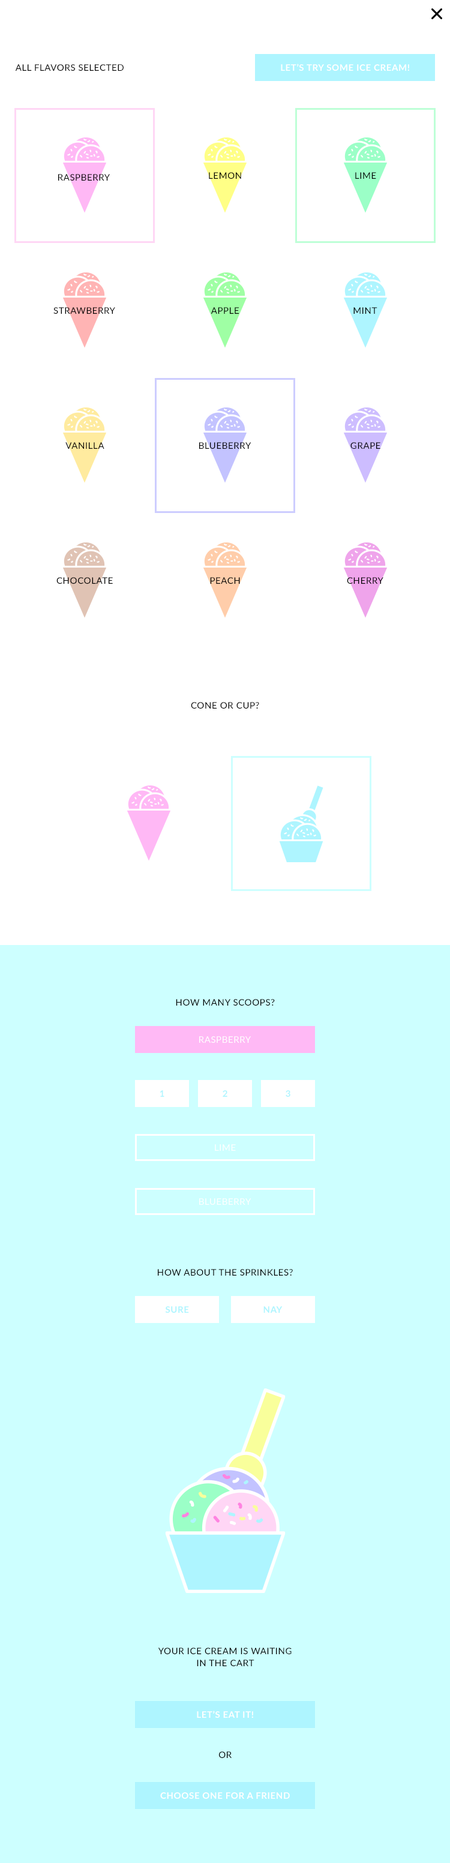
<style>
.page{position:relative;width:450px;height:1863px;background:#ffffff}
.page>*{position:absolute;margin:0}
.t1{font:9px "Lato-Regular";letter-spacing:0.04em;color:#000000;text-transform:uppercase}
.t2{font:9px "Lato-Bold";letter-spacing:0.04em;color:#ffffff;text-transform:uppercase}
.t3{font:9px "Lato-Regular";letter-spacing:0.04em;color:#ffffff;text-transform:uppercase}
.t4{font:9px "Lato-Bold";letter-spacing:0.04em;color:#aef5ff;text-transform:uppercase}
.t5{font:9px/12px "Lato-Regular";letter-spacing:0.04em;color:#000000;text-transform:uppercase}
</style>
<div class="page">
<p class="t1" style="left:15px;top:64px;width:109px;height:7px">all flavors selected</p>
<p class="t2" style="left:281px;top:64px;width:128px;height:7px">let’s try some ice cream!</p>
<p class="t1" style="left:58px;top:174px;width:52px;height:7px">raspberry</p>
<p class="t1" style="left:209px;top:172px;width:32px;height:7px">lemon</p>
<p class="t1" style="left:355px;top:172px;width:21px;height:7px">lime</p>
<p class="t1" style="left:53px;top:307px;width:62px;height:7px">strawberry</p>
<p class="t1" style="left:211px;top:307px;width:28px;height:7px">apple</p>
<p class="t1" style="left:353px;top:307px;width:24px;height:7px">mint</p>
<p class="t1" style="left:65px;top:442px;width:39px;height:7px">vanilla</p>
<p class="t1" style="left:199px;top:442px;width:52px;height:7px">blueberry</p>
<p class="t1" style="left:350px;top:442px;width:30px;height:7px">grape</p>
<p class="t1" style="left:56px;top:577px;width:57px;height:7px">chocolate</p>
<p class="t1" style="left:210px;top:577px;width:30px;height:7px">peach</p>
<p class="t1" style="left:347px;top:577px;width:36px;height:7px">cherry</p>
<p class="t1" style="left:191px;top:702px;width:68px;height:7px">cone or cup?</p>
<p class="t1" style="left:176px;top:999px;width:99px;height:7px">How many scoops?</p>
<p class="t3" style="left:199px;top:1036px;width:52px;height:7px">raspberry</p>
<p class="t4" style="left:160px;top:1090px;width:4px;height:7px">1</p>
<p class="t4" style="left:223px;top:1090px;width:4px;height:7px">2</p>
<p class="t4" style="left:286px;top:1090px;width:4px;height:7px">3</p>
<p class="t3" style="left:215px;top:1144px;width:21px;height:7px">lime</p>
<p class="t3" style="left:199px;top:1198px;width:52px;height:7px">blueberry</p>
<p class="t1" style="left:158px;top:1269px;width:135px;height:7px">how about the sprinkles?</p>
<p class="t4" style="left:165px;top:1306px;width:24px;height:7px">Sure</p>
<p class="t4" style="left:263px;top:1306px;width:20px;height:7px">nay</p>
<p class="t5" style="left:158px;top:1648px;width:134px;height:18px;text-align:center">your ice cream is waiting<br>in the cart</p>
<p class="t2" style="left:197px;top:1711px;width:56px;height:7px">let’s eat it!</p>
<p class="t1" style="left:219px;top:1751px;width:13px;height:7px">or</p>
<p class="t2" style="left:160px;top:1792px;width:130px;height:7px">choose one for a friend</p>
</div>
